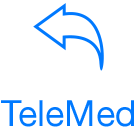
<style>
.page{position:relative;width:136px;height:135px;background:#ffffff}
.page>*{position:absolute;margin:0}
.t1{font:36px "HelveticaNeueLTCom-Roman";color:#0079ff}
</style>
<div class="page">
<p class="t1" style="left:1px;top:100px;width:133px;height:27px">TeleMed</p>
</div>
